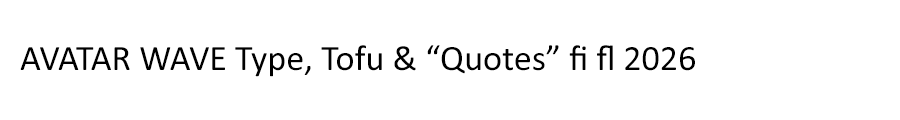
<style>
.page{position:relative;width:900px;height:120px;background:#ffffff}
.page>*{position:absolute;margin:0}
.t1{font:36px "Calibri";color:#000000}
</style>
<div class="page">
<p class="t1" style="left:20px;top:45px;width:675px;height:32px">AVATAR WAVE Type, Tofu &amp; “Quotes” fi fl 2026</p>
</div>
